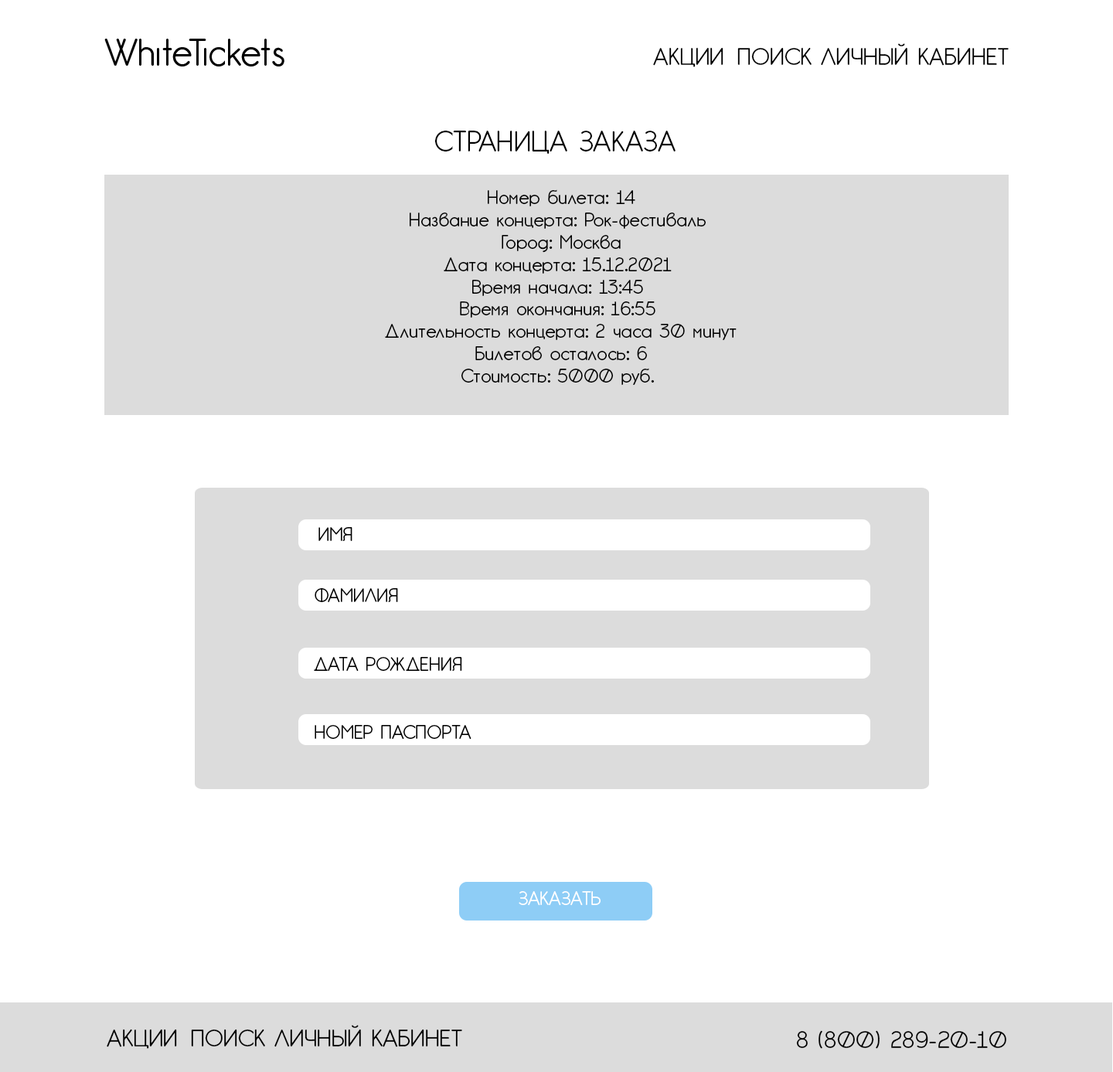
<style>
.page{position:relative;width:1113px;height:1072px;background:#ffffff}
.page>*{position:absolute;margin:0}
.t1{font:23.2px "GardensC";color:#000000}
.t2{font:27.8px "GardensC";color:#000000}
.t3{font:18.5px "GardensC";color:#000000}
.t4{font:18.5px "GardensC";color:#ffffff}
</style>
<div class="page">
<p class="t1" style="left:653px;top:43px;width:355px;height:24px">АКЦИИ ПОИСК ЛИЧНЫЙ КАБИНЕТ</p>
<p class="t2" style="left:435px;top:131px;width:240px;height:23px">СТРАНИЦА ЗАКАЗА</p>
<p class="t3" style="left:385px;top:189px;width:351px;height:196px;text-align:center">Номер билета: 14<br>Название концерта: Рок-фестиваль <br>Город: Москва<br>Дата концерта: 15.12.2021 <br>Время начала: 13:45 <br>Время окончания: 16:55 <br>Длительность концерта: 2 часа 30 минут<br>Билетов осталось: 6<br>Стоимость: 5000 руб.</p>
<p class="t3" style="left:318px;top:527px;width:34px;height:14px">ИМЯ</p>
<p class="t3" style="left:314px;top:588px;width:84px;height:15px">ФАМИЛИЯ</p>
<p class="t3" style="left:314px;top:657px;width:148px;height:14px">ДАТА РОЖДЕНИЯ</p>
<p class="t3" style="left:314px;top:725px;width:157px;height:14px">НОМЕР ПАСПОРТА</p>
<p class="t4" style="left:518px;top:891px;width:82px;height:15px">ЗАКАЗАТЬ</p>
<p class="t1" style="left:107px;top:1025px;width:355px;height:24px">АКЦИИ ПОИСК ЛИЧНЫЙ КАБИНЕТ</p>
<p class="t1" style="left:796px;top:1030px;width:210px;height:19px">8 (800) 289-20-10</p>
</div>
